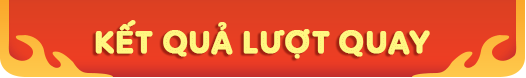
<style>
.page{position:relative;width:526px;height:78px}
.page>*{position:absolute;margin:0}
.t1{font:32px "SVN-AdamGorry";color:#fff781;font-weight:bold}
</style>
<div class="page">
<p class="t1" style="left:95px;top:20px;width:335px;height:39px">KẾT QUẢ LƯỢT QUAY</p>
</div>
